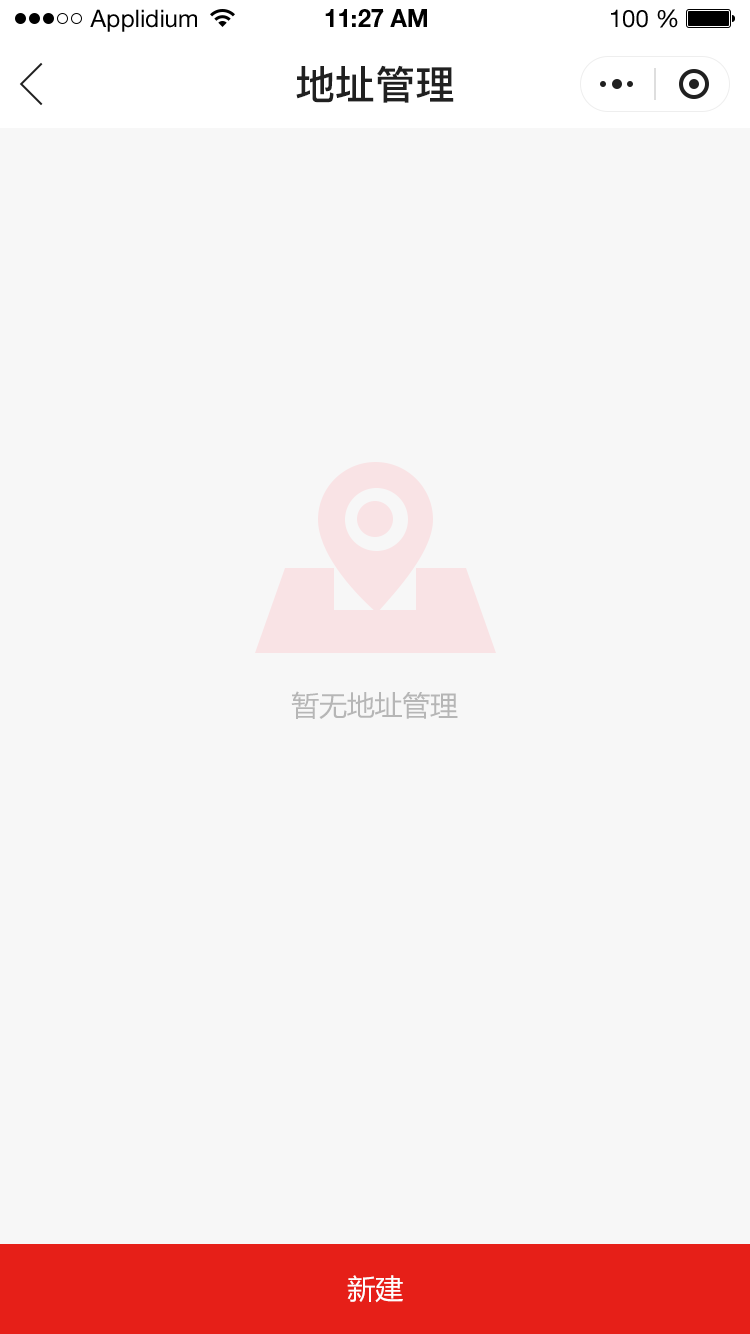
<style>
.page{position:relative;width:750px;height:1334px;background:#f7f7f7}
.page>*{position:absolute;margin:0}
.t1{font:24px "HelveticaNeueLTStd-Roman";color:#000000}
.t2{font:24px "HelveticaNeueLTStd-Bd";color:#000000}
.t3{font:40px "PingFang-SC-Bold";color:#202020;text-transform:uppercase}
.t4{font:28px "MicrosoftYaHei";letter-spacing:-0.01em;color:#b6b6b6;text-transform:uppercase}
.t5{font:28px "MicrosoftYaHei";color:#fefefe;text-transform:uppercase}
</style>
<div class="page">
<p class="t1" style="left:90px;top:9px;width:107px;height:23px">Applidium</p>
<p class="t2" style="left:325px;top:9px;width:102px;height:18px">11:27 AM</p>
<p class="t1" style="left:611px;top:9px;width:67px;height:19px">100 %</p>
<p class="t3" style="left:296px;top:65px;width:158px;height:38px">地址管理</p>
<p class="t4" style="left:291px;top:691px;width:167px;height:28px">暂无地址管理</p>
<p class="t5" style="left:347px;top:1275px;width:56px;height:28px">新建</p>
</div>
